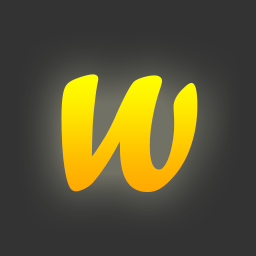
<style>
.page{position:relative;width:256px;height:256px;background:#333333}
.page>*{position:absolute;margin:0}
.t1{font:175.2px "ForteMT"}
</style>
<div class="page">
<p class="t1" style="left:61px;top:74px;width:137px;height:118px">W</p>
</div>
